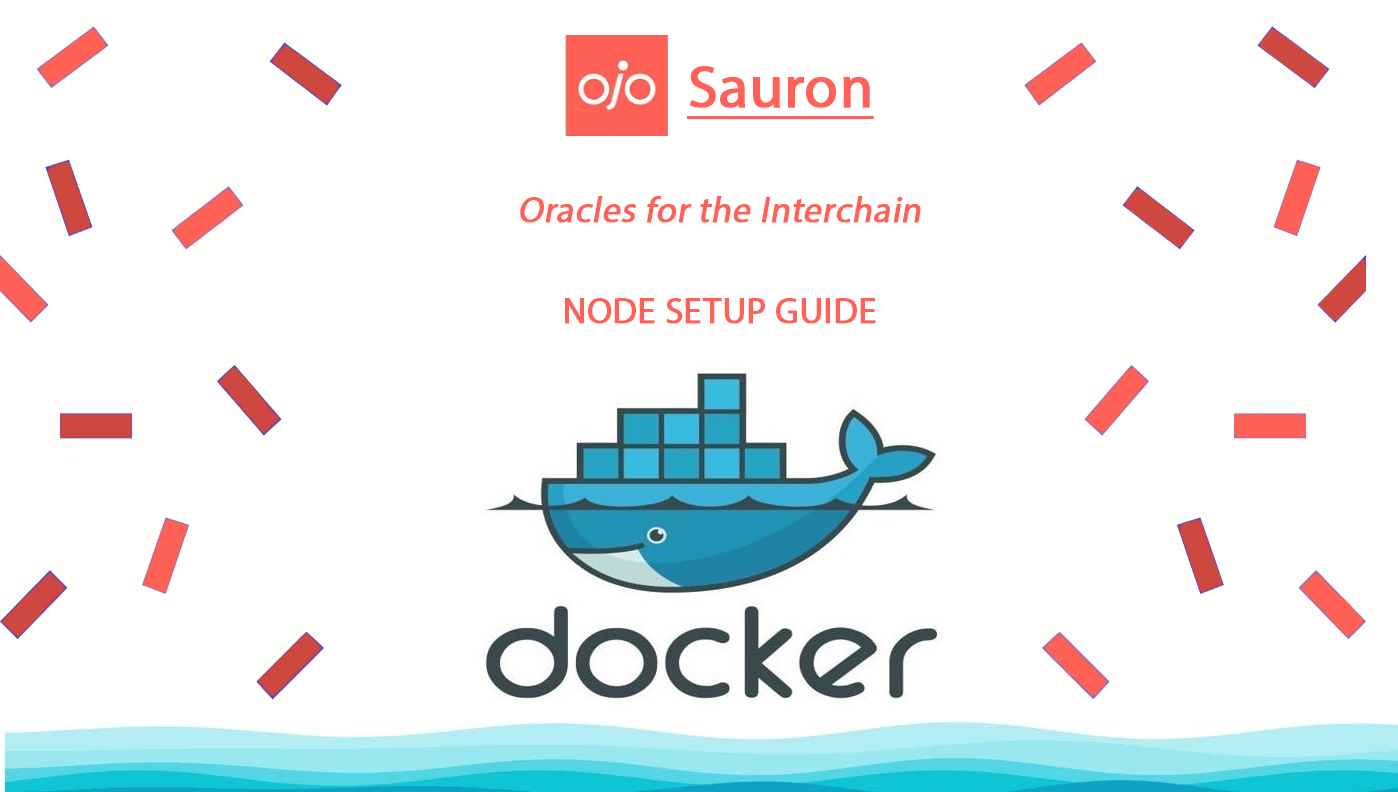
<style>
.page{position:relative;width:1398px;height:792px;background:#ffffff}
.page>*{position:absolute;margin:0}
.t1{font:60px "MyriadPro-Regular";color:#ff6157;font-weight:bold;text-decoration:underline}
.t2{font:36px "MyriadPro-Regular";color:#ff6157;font-weight:bold;font-style:italic}
.t3{font:36px "MyriadPro-Regular";color:#ff6157;text-transform:uppercase;font-weight:bold}
</style>
<div class="page">
<p class="t1" style="left:687px;top:66px;width:187px;height:53px">Sauron</p>
<p class="t2" style="left:520px;top:196px;width:401px;height:27px">Oracles for the Interchain</p>
<p class="t3" style="left:565px;top:298px;width:311px;height:26px">Node Setup Guide</p>
</div>
